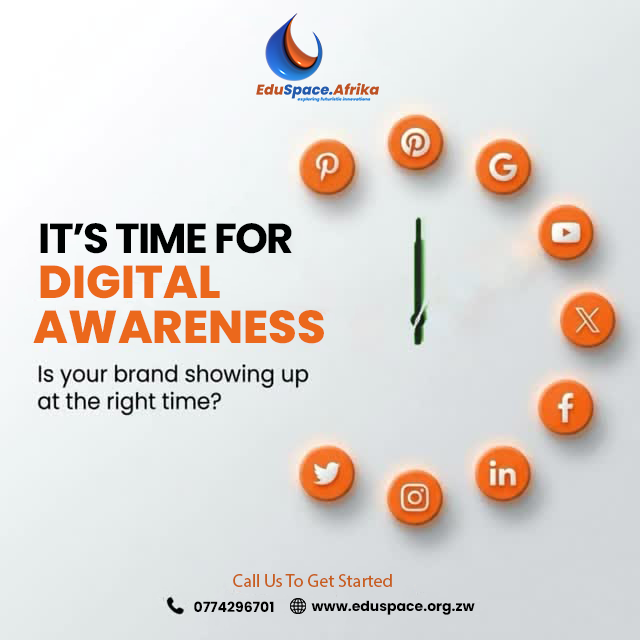
<style>
.page{position:relative;width:640px;height:640px}
.page>*{position:absolute;margin:0}
.t1{font:42px "Poppins-Bold";letter-spacing:-0.04em;color:#000202}
.t2{font:46px "Poppins-ExtraBold";color:#eb671c}
.t3{font:46px "Poppins-ExtraBold";color:#eb681c}
.t4{font:18px "MyriadPro-Regular";color:#c85e1e}
.t5{font:14px "Poppins-Bold";color:#010101}
</style>
<div class="page">
<p class="t1" style="left:40px;top:223px;width:252px;height:31px">IT’S TIME FOR</p>
<p class="t2" style="left:40px;top:265px;width:180px;height:34px">DIGITAL</p>
<p class="t3" style="left:33px;top:310px;width:291px;height:34px">AWARENESS</p>
<p class="t4" style="left:233px;top:574px;width:159px;height:13px">Call Us To Get Started</p>
<p class="t5" style="left:194px;top:601px;width:80px;height:11px">0774296701</p>
<p class="t5" style="left:311px;top:600px;width:164px;height:15px">www.eduspace.org.zw</p>
</div>
